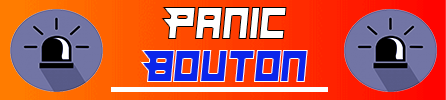
<style>
.page{position:relative;width:446px;height:100px}
.page>*{position:absolute;margin:0}
.t1{font:45.8px "Hindsight2020";color:#ffffff;scale:0.92 1}
.t2{font:45.8px "Hindsight2020";color:#0b25eb;scale:0.92 1}
</style>
<div class="page">
<p class="t1" style="left:161px;top:7px;width:126px;height:32px">Panic</p>
<p class="t2" style="left:140px;top:50px;width:168px;height:32px">Bouton</p>
</div>
